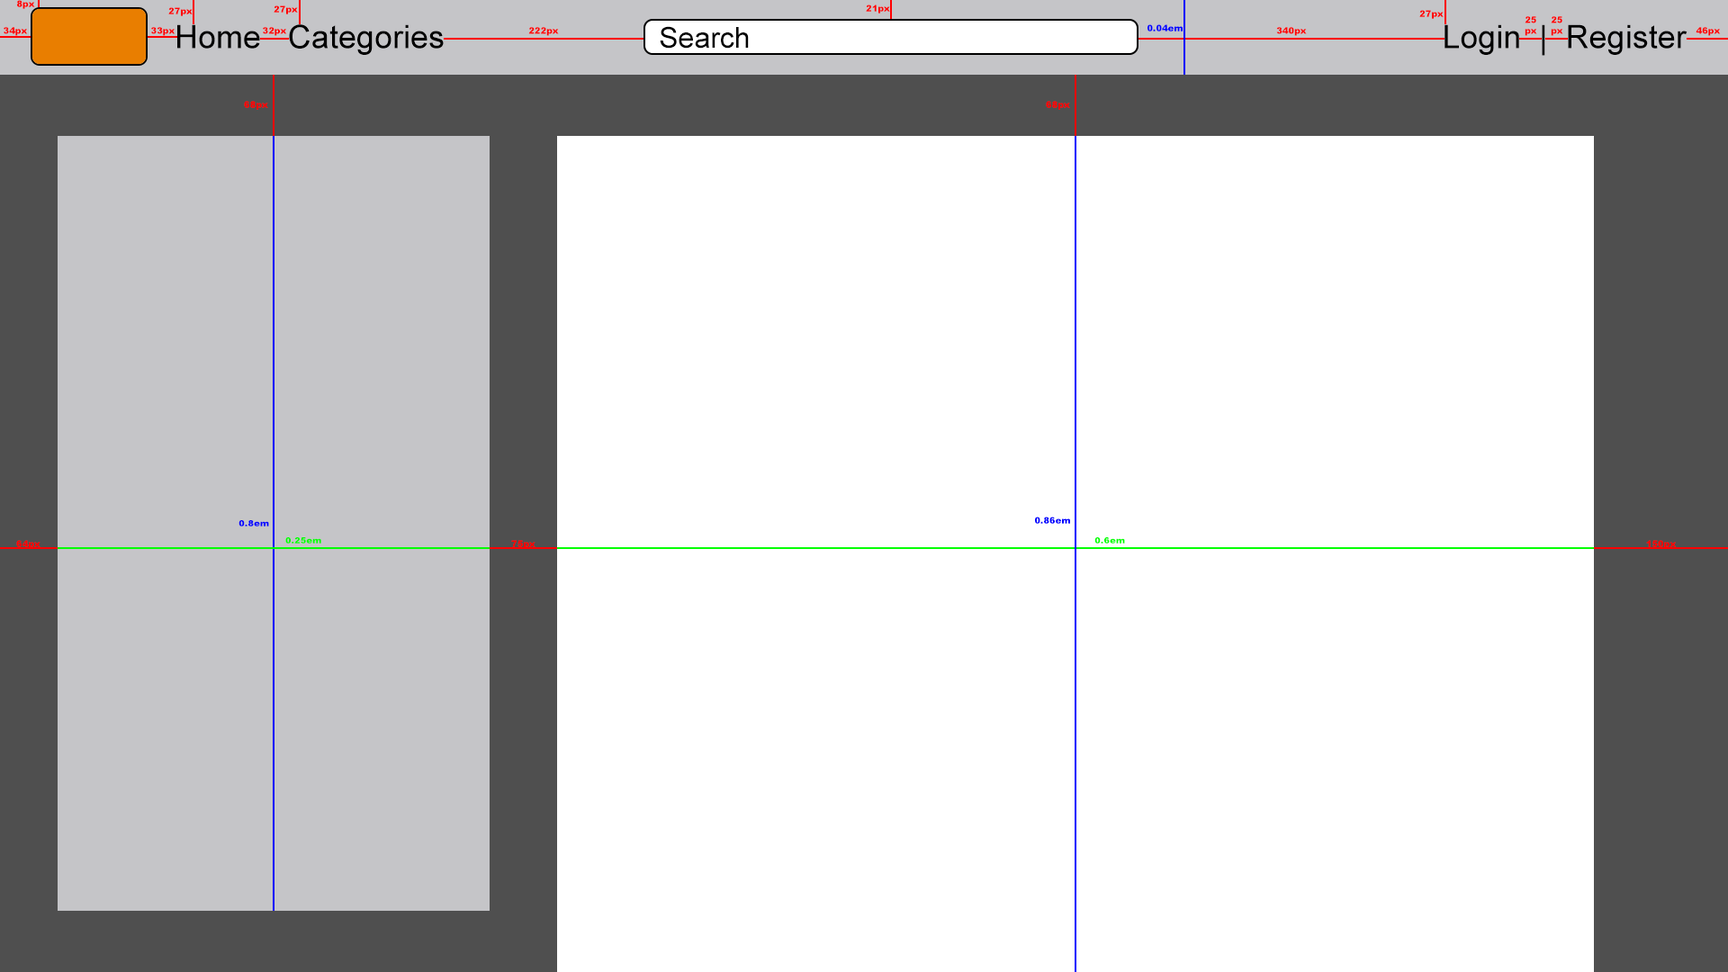
<style>
.page{position:relative;width:1728px;height:972px;background:#ffffff}
.page>*{position:absolute;margin:0}
.t1{font:9px "Arial-Black";color:#ff0101}
.t2{font:32.4px "ArialMT";color:#000000}
.t3{font:28.8px "ArialMT";color:#000000}
.t4{font:9px "Arial-Black";color:#0000ff}
.t5{font:8.3px "Arial-Black";color:#0000ff;scale:1.09 1}
.t6{font:8.3px "Arial-Black";color:#00ff00;scale:1.09 1}
</style>
<div class="page">
<p class="t1" style="left:17px;top:0px;width:18px;height:9px">8px</p>
<p class="t1" style="left:274px;top:5px;width:24px;height:9px">27px</p>
<p class="t1" style="left:866px;top:4px;width:24px;height:10px">21px</p>
<p class="t1" style="left:168px;top:7px;width:25px;height:9px">27px</p>
<p class="t1" style="left:1419px;top:10px;width:25px;height:9px">27px</p>
<p class="t1" style="left:1525px;top:16px;width:12px;height:20px;text-align:center">25<br>px</p>
<p class="t1" style="left:1551px;top:16px;width:12px;height:20px;text-align:center">25<br>px</p>
<p class="t1" style="left:4px;top:27px;width:24px;height:9px">34px</p>
<p class="t1" style="left:151px;top:27px;width:25px;height:9px">33px</p>
<p class="t2" style="left:177px;top:24px;width:83px;height:25px">Home</p>
<p class="t1" style="left:263px;top:27px;width:24px;height:9px">32px</p>
<p class="t2" style="left:289px;top:24px;width:155px;height:31px">Categories</p>
<p class="t1" style="left:528px;top:27px;width:31px;height:9px">222px</p>
<p class="t3" style="left:660px;top:26px;width:89px;height:23px">Search</p>
<p class="t4" style="left:1148px;top:24px;width:35px;height:8px">0.04em</p>
<p class="t1" style="left:1276px;top:27px;width:31px;height:9px">340px</p>
<p class="t2" style="left:1444px;top:24px;width:244px;height:32px">Login  |  Register</p>
<p class="t1" style="left:1696px;top:27px;width:25px;height:9px">46px</p>
<p class="t1" style="left:244px;top:101px;width:24px;height:9px">68px</p>
<p class="t1" style="left:1046px;top:101px;width:24px;height:9px">68px</p>
<p class="t5" style="left:238px;top:520px;width:31px;height:6px">0.8em</p>
<p class="t4" style="left:1035px;top:517px;width:35px;height:7px">0.86em</p>
<p class="t1" style="left:16px;top:540px;width:24px;height:9px">64px</p>
<p class="t6" style="left:285px;top:537px;width:36px;height:7px">0.25em</p>
<p class="t1" style="left:511px;top:540px;width:25px;height:9px">75px</p>
<p class="t6" style="left:1094px;top:537px;width:31px;height:7px">0.6em</p>
<p class="t1" style="left:1646px;top:540px;width:31px;height:9px">150px</p>
</div>
